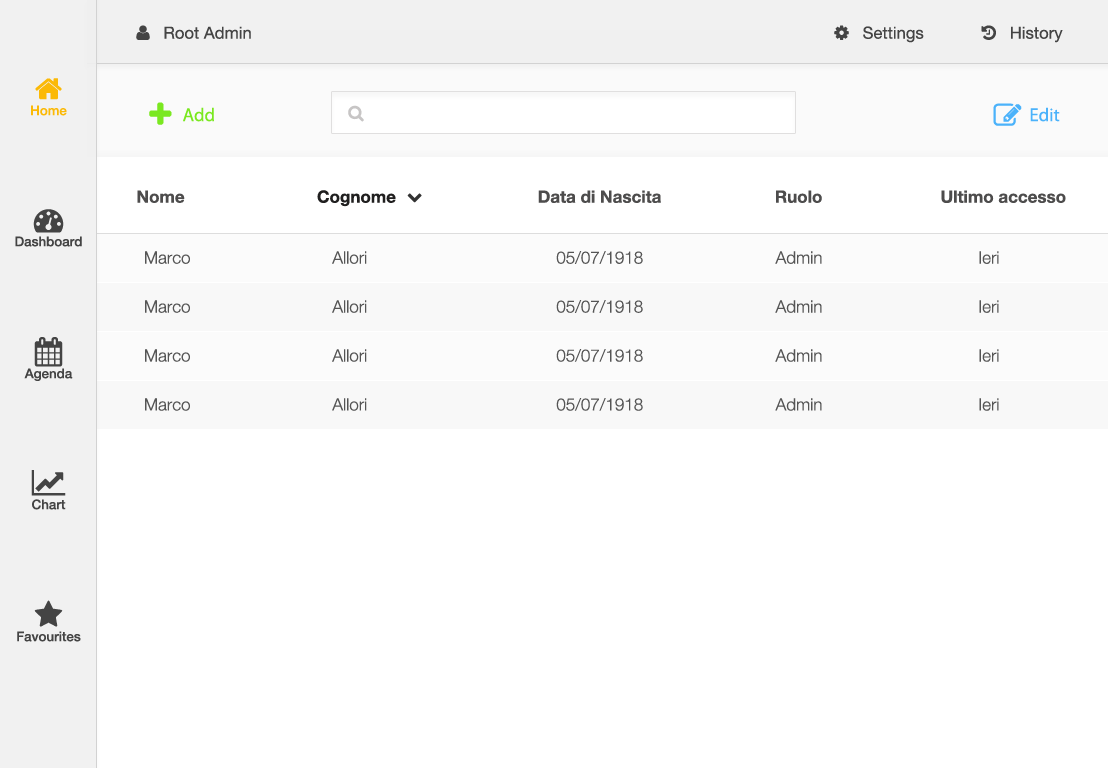
<style>
.page{position:relative;width:1108px;height:768px;background:#ffffff}
.page>*{position:absolute;margin:0}
.t1{font:18.7px "MyriadPro-Regular";color:#7ae820}
.t2{font:18.7px "MyriadPro-Regular";color:#4bb2fa}
.t3{font:17px "HelveticaNeue-Bold";color:#4d4c4c}
.t4{font:17px "HelveticaNeue-Bold";color:#201f1f}
.t5{font:17px "HelveticaNeue-Light";color:#555555}
</style>
<div class="page">
<p class="t1" style="left:183px;top:107px;width:31px;height:15px">Add</p>
<p class="t2" style="left:1030px;top:107px;width:30px;height:15px">Edit</p>
<p class="t3" style="left:137px;top:190px;width:929px;height:17px">Nome                            <span class="t4">Cognome      </span>                        Data di Nascita                        Ruolo                         Ultimo accesso</p>
<p class="t5" style="left:145px;top:251px;width:854px;height:13px">Marco                              Allori                                        05/07/1918                            Admin                                 Ieri</p>
<p class="t5" style="left:145px;top:300px;width:854px;height:13px">Marco                              Allori                                        05/07/1918                            Admin                                 Ieri</p>
<p class="t5" style="left:145px;top:349px;width:854px;height:13px">Marco                              Allori                                        05/07/1918                            Admin                                 Ieri</p>
<p class="t5" style="left:145px;top:398px;width:854px;height:13px">Marco                              Allori                                        05/07/1918                            Admin                                 Ieri</p>
</div>
